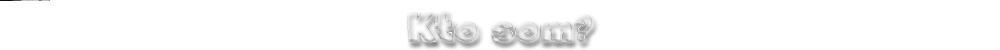
<style>
.page{position:relative;width:1000px;height:50px;background:#ffffff}
.page>*{position:absolute;margin:0}
.t1{font:40px "SneakerheadBTNShadow"}
</style>
<div class="page">
<p class="t1" style="left:407px;top:11px;width:185px;height:31px">Kto som?</p>
</div>
